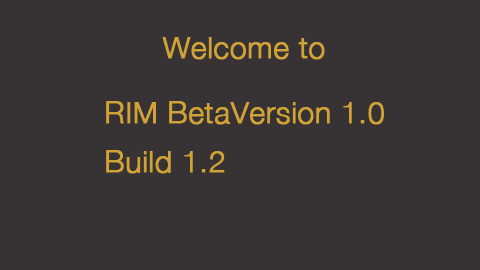
<style>
.page{position:relative;width:480px;height:270px;background:#373334}
.page>*{position:absolute;margin:0}
.t1{font:30px "HelveticaNeue-Light";color:#d1a236;font-weight:bold}
</style>
<div class="page">
<p class="t1" style="left:162px;top:37px;width:163px;height:23px">Welcome to</p>
<p class="t1" style="left:106px;top:101px;width:278px;height:24px">RIM BetaVersion 1.0</p>
<p class="t1" style="left:106px;top:150px;width:119px;height:24px">Build 1.2</p>
</div>
